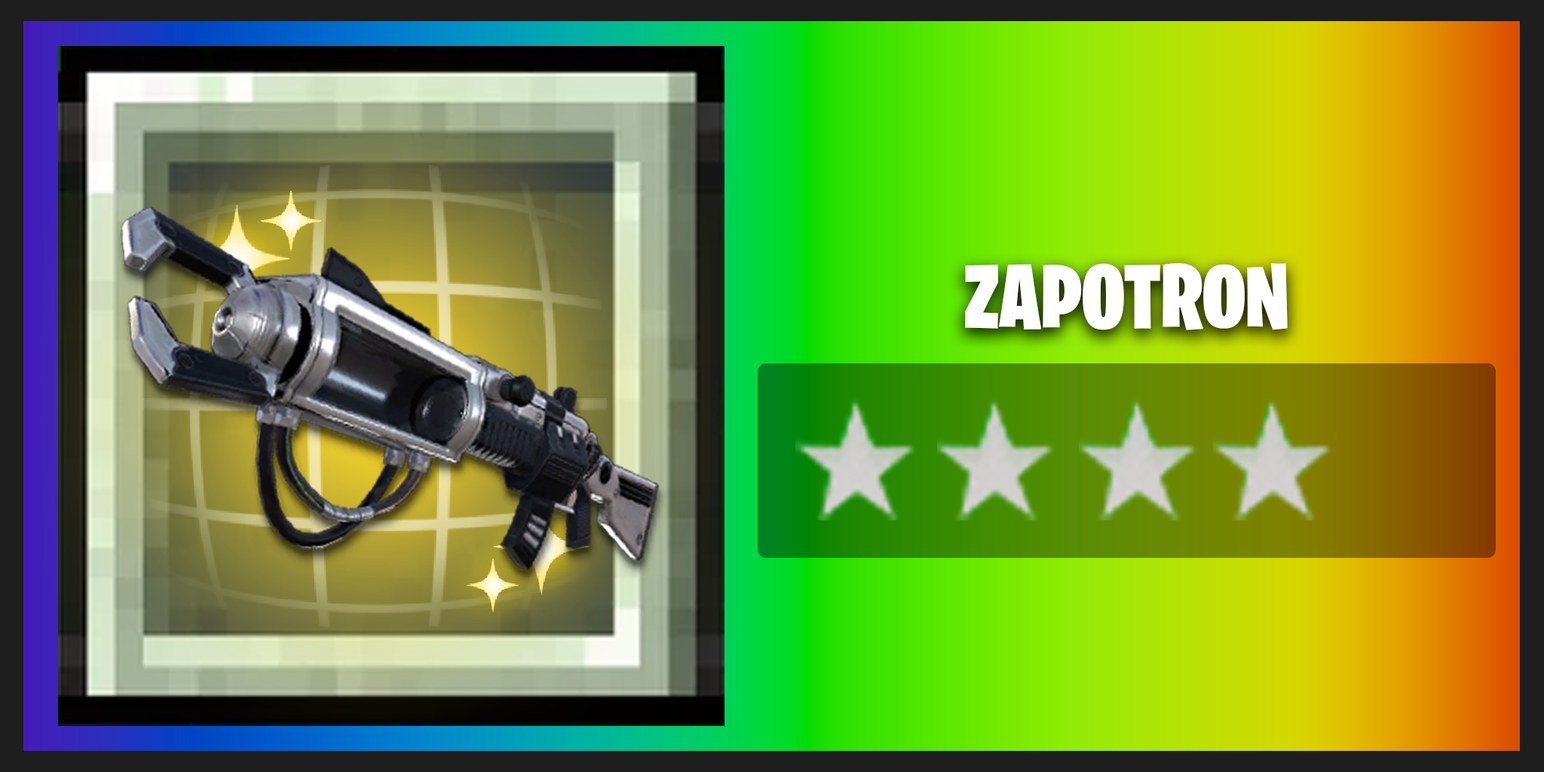
<style>
.page{position:relative;width:1544px;height:772px}
.page>*{position:absolute;margin:0}
.t1{font:90.5px "BurbankBigCondensed-Black";color:#ffffff}
</style>
<div class="page">
<p class="t1" style="left:965px;top:263px;width:323px;height:67px">ZAPOTRON</p>
</div>
